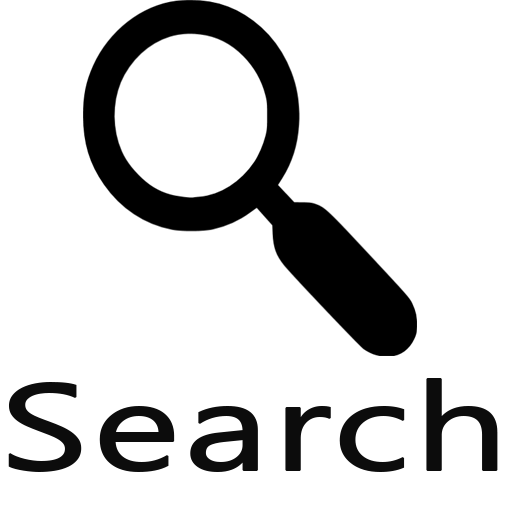
<style>
.page{position:relative;width:512px;height:512px;background:#ffffff}
.page>*{position:absolute;margin:0}
.t1{font:123.2px "Gadugi";color:#0c0c0c;font-weight:bold;scale:1.35 1}
</style>
<div class="page">
<p class="t1" style="left:8px;top:378px;width:490px;height:94px">Search</p>
</div>
